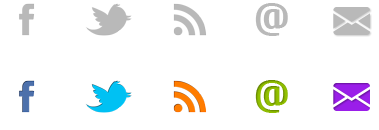
<style>
.page{position:relative;width:379px;height:130px;background:#ffffff}
.page>*{position:absolute;margin:0}
.t1{font:42px "Cuprum-Bold";color:#b9b9b9}
.t2{font:42px "Cuprum-Bold";color:#8cb900}
</style>
<div class="page">
<p class="t1" style="left:255px;top:3px;width:33px;height:33px">@</p>
<p class="t2" style="left:255px;top:80px;width:33px;height:33px">@</p>
</div>
